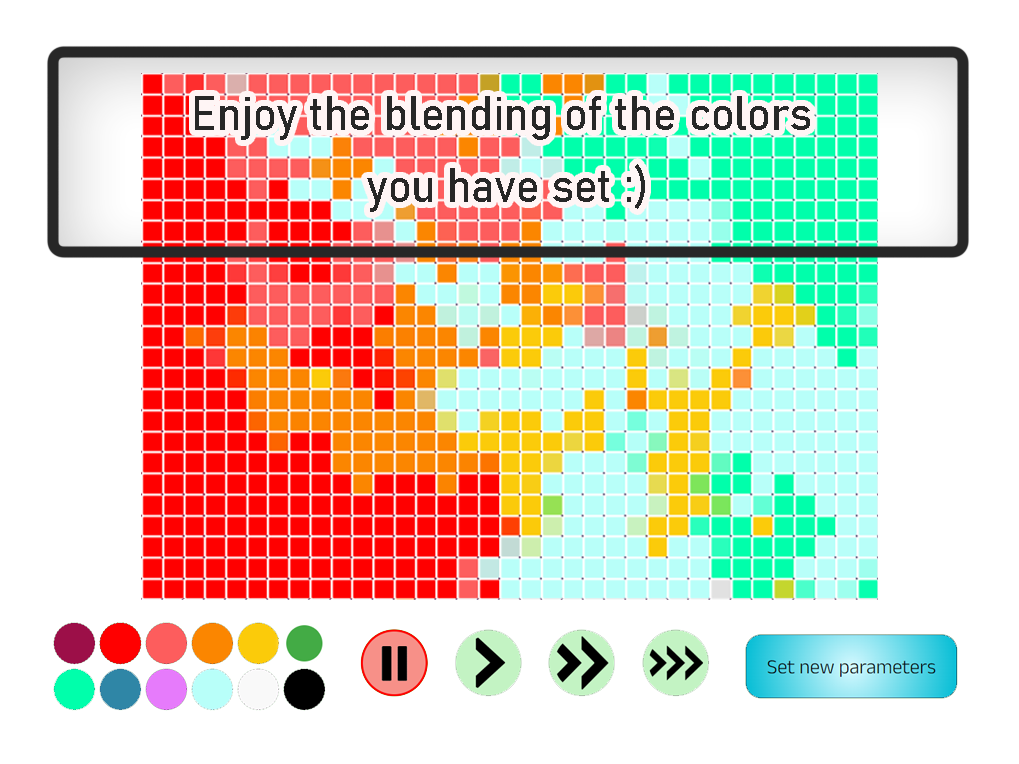
<style>
.page{position:relative;width:1019px;height:764px;background:#ffffff}
.page>*{position:absolute;margin:0}
.t1{font:48px/24px "Bahnschrift_367.000wght_92.000wdth";color:#272727}
</style>
<div class="page">
<p class="t1" style="left:195px;top:96px;width:615px;height:116px;text-align:center">Enjoy the blending of the colors <br><br><br>you have set :)</p>
</div>
